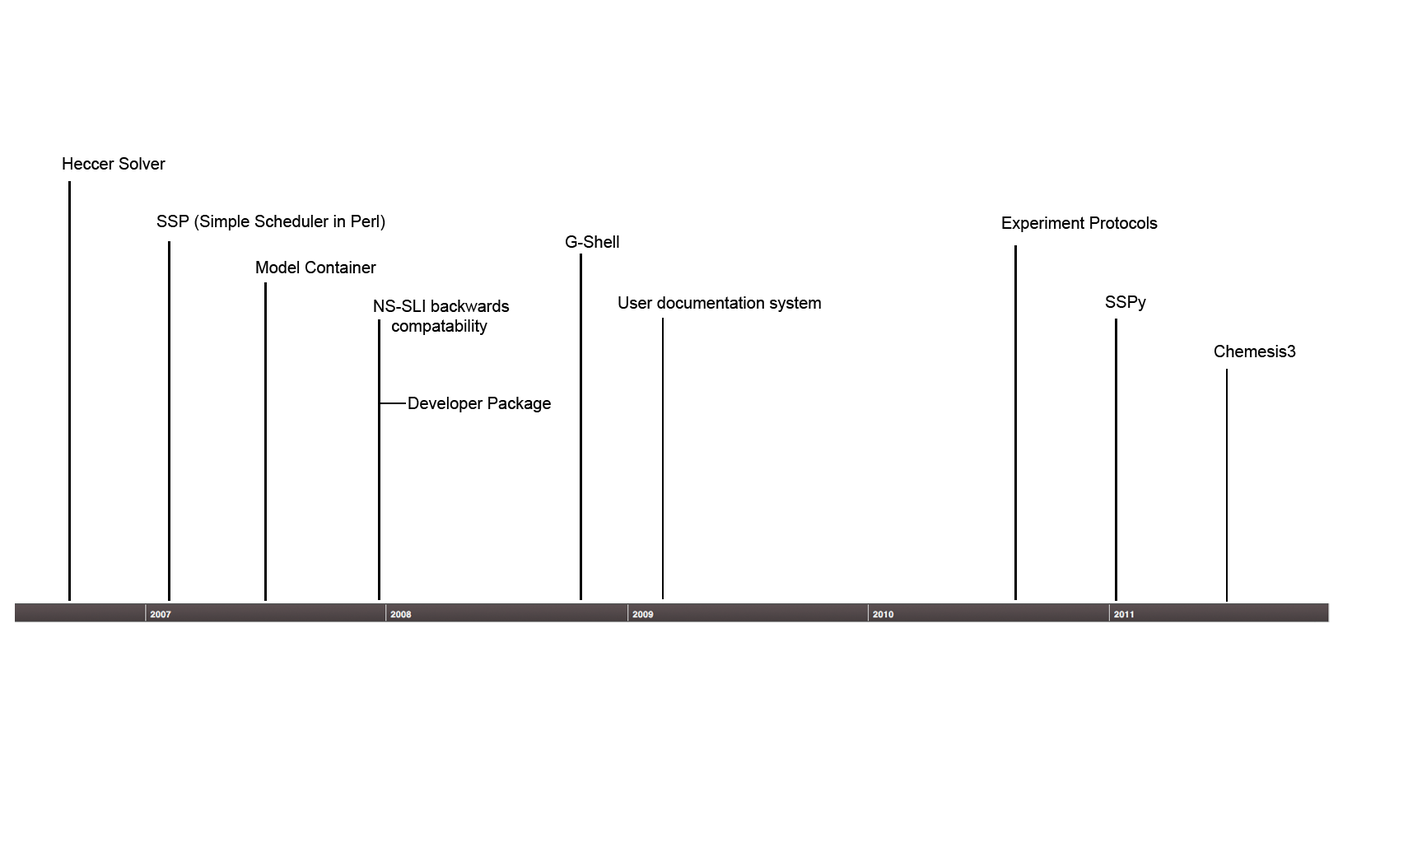
<style>
.page{position:relative;width:1408px;height:847px;background:#ffffff}
.page>*{position:absolute;margin:0}
.t1{font:16.5px "ArialMT";color:#000000}
</style>
<div class="page">
<p class="t1" style="left:63px;top:157px;width:102px;height:13px">Heccer Solver</p>
<p class="t1" style="left:156px;top:215px;width:229px;height:15px">SSP (Simple Scheduler in Perl)</p>
<p class="t1" style="left:1002px;top:217px;width:155px;height:15px">Experiment Protocols</p>
<p class="t1" style="left:566px;top:235px;width:53px;height:13px">G-Shell</p>
<p class="t1" style="left:256px;top:261px;width:120px;height:12px">Model Container</p>
<p class="t1" style="left:374px;top:300px;width:136px;height:35px">NS-SLI backwards <br>    compatability</p>
<p class="t1" style="left:618px;top:296px;width:203px;height:16px">User documentation system</p>
<p class="t1" style="left:1105px;top:296px;width:41px;height:15px">SSPy</p>
<p class="t1" style="left:1213px;top:345px;width:83px;height:12px">Chemesis3</p>
<p class="t1" style="left:408px;top:397px;width:143px;height:15px">Developer Package</p>
</div>
